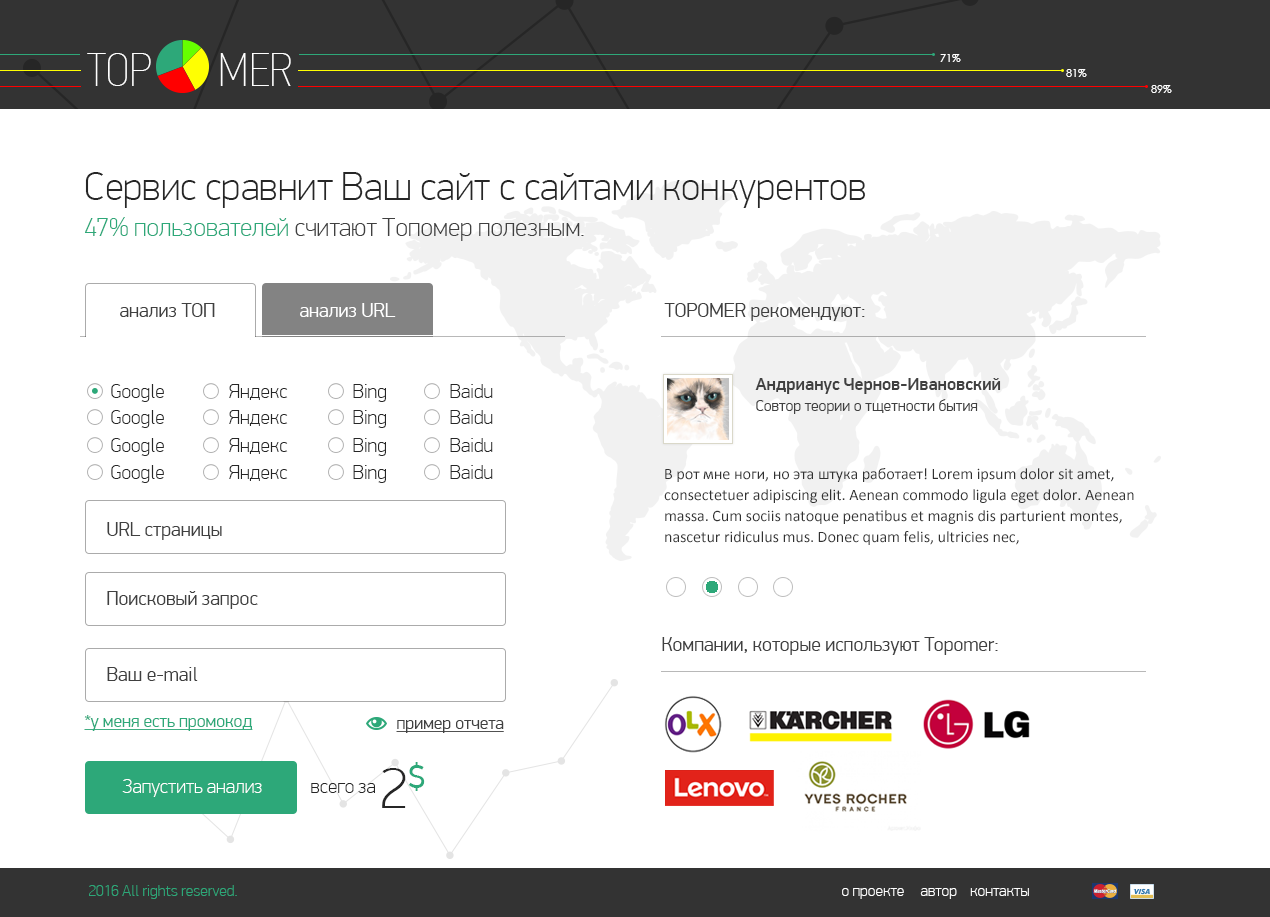
<style>
.page{position:relative;width:1270px;height:917px;background:#ffffff}
.page>*{position:absolute;margin:0}
.t1{font:48px "PFDinTextCondPro-XThin";color:#ffffff;text-transform:uppercase}
.t2{font:11px "CenturyGothic";color:#ffffff;text-transform:uppercase}
.t3{font:40px "PFDinDisplayPro-Thin";color:#262626}
.t4{font:26px "PFDinDisplayPro-Thin";color:#404040}
.t5{font:26px "PFDinDisplayPro-Thin";color:#2da879}
.t6{font:20px "PFDinDisplayPro-Light";color:#404040}
.t7{font:20px "PFDinDisplayPro-Light";color:#ffffff}
.t8{font:20px "PFDinDisplayPro-Thin";color:#262626}
.t9{font:18px "PFDinDisplayPro-Medium";color:#404040}
.t10{font:16px "PFDinDisplayPro-Light";color:#404040}
.t11{font:16px/21px "Calibri";color:#313131}
.t12{font:18px "PFDinDisplayPro-Light";color:#2da879;text-decoration:underline}
.t13{font:18px "PFDinDisplayPro-Light";color:#404040;text-decoration:underline}
.t14{font:58.5px "PFDinDisplayPro-Thin";color:#262626}
.t15{font:58.5px "PFDinDisplayPro-Regular";color:#2da879}
.t16{font:20px "PFDinDisplayPro-Thin";color:#ffffff}
.t17{font:16px "PFDinDisplayPro-Thin";color:#2da879}
.t18{font:16px "PFDinDisplayPro-Thin";color:#ffffff}
</style>
<div class="page">
<p class="t1" style="left:87px;top:53px;width:64px;height:33px">top</p>
<p class="t1" style="left:220px;top:53px;width:71px;height:33px">mer</p>
<p class="t2" style="left:940px;top:54px;width:21px;height:8px">71%</p>
<p class="t2" style="left:1066px;top:69px;width:21px;height:8px">81%</p>
<p class="t2" style="left:1151px;top:85px;width:21px;height:8px">89%</p>
<p class="t3" style="left:85px;top:172px;width:780px;height:36px">Сервис сравнит Ваш сайт с сайтами конкурентов</p>
<p class="t4" style="left:85px;top:217px;width:499px;height:24px"><span class="t5">47% пользователей </span>считают Топомер полезным.</p>
<p class="t6" style="left:120px;top:303px;width:95px;height:14px">анализ ТОП</p>
<p class="t7" style="left:300px;top:303px;width:96px;height:14px">анализ URL</p>
<p class="t6" style="left:664px;top:303px;width:201px;height:18px">TOPOMER рекомендуют:</p>
<p class="t8" style="left:111px;top:384px;width:53px;height:18px">Google</p>
<p class="t8" style="left:229px;top:384px;width:59px;height:16px">Яндекс</p>
<p class="t8" style="left:353px;top:384px;width:33px;height:18px">Bing</p>
<p class="t8" style="left:450px;top:384px;width:43px;height:14px">Baidu</p>
<p class="t9" style="left:755px;top:378px;width:246px;height:16px">Андрианус Чернов-Ивановский</p>
<p class="t10" style="left:756px;top:399px;width:222px;height:15px">Cовтор теории о тщетности бытия</p>
<p class="t8" style="left:111px;top:410px;width:53px;height:18px">Google</p>
<p class="t8" style="left:229px;top:410px;width:59px;height:16px">Яндекс</p>
<p class="t8" style="left:353px;top:410px;width:33px;height:18px">Bing</p>
<p class="t8" style="left:450px;top:410px;width:43px;height:14px">Baidu</p>
<p class="t8" style="left:111px;top:438px;width:53px;height:18px">Google</p>
<p class="t8" style="left:229px;top:438px;width:59px;height:16px">Яндекс</p>
<p class="t8" style="left:353px;top:438px;width:33px;height:18px">Bing</p>
<p class="t8" style="left:450px;top:438px;width:43px;height:14px">Baidu</p>
<p class="t8" style="left:111px;top:465px;width:53px;height:18px">Google</p>
<p class="t8" style="left:229px;top:465px;width:59px;height:16px">Яндекс</p>
<p class="t8" style="left:353px;top:465px;width:33px;height:18px">Bing</p>
<p class="t8" style="left:450px;top:465px;width:43px;height:14px">Baidu</p>
<p class="t11" style="left:664px;top:468px;width:470px;height:77px">В рот мне ноги, но эта штука работает! Lorem ipsum dolor sit amet, consectetuer adipiscing elit. Aenean commodo ligula eget dolor. Aenean massa. Cum sociis natoque penatibus et magnis dis parturient montes, nascetur ridiculus mus. Donec quam felis, ultricies nec,</p>
<p class="t6" style="left:107px;top:522px;width:115px;height:18px">URL страницы</p>
<p class="t6" style="left:107px;top:591px;width:151px;height:18px">Поисковый запрос</p>
<p class="t6" style="left:662px;top:637px;width:336px;height:18px">Компании, которые используют Topomer:</p>
<p class="t6" style="left:107px;top:667px;width:91px;height:14px">Ваш e-mail</p>
<p class="t12" style="left:84px;top:715px;width:169px;height:16px">*у меня есть промокод</p>
<p class="t13" style="left:396px;top:720px;width:108px;height:13px">пример отчета</p>
<p class="t14" style="left:382px;top:762px;width:43px;height:46px">2<span class="t15">$</span></p>
<p class="t16" style="left:122px;top:779px;width:140px;height:18px">Запустить анализ</p>
<p class="t8" style="left:311px;top:783px;width:64px;height:10px">всего за</p>
<p class="t17" style="left:89px;top:885px;width:148px;height:14px">2016 All rights reserved.</p>
<p class="t18" style="left:842px;top:888px;width:187px;height:11px">о проекте     автор    контакты</p>
</div>
